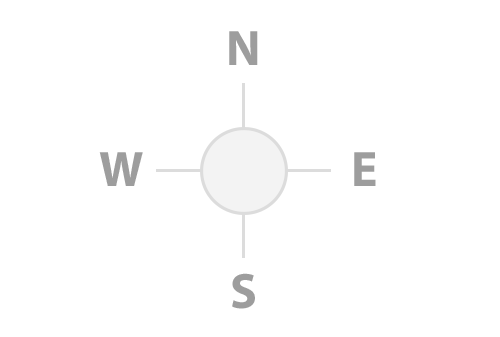
<style>
.page{position:relative;width:500px;height:337px;background:#ffffff}
.page>*{position:absolute;margin:0}
.t1{font:50px "MyriadPro-Bold";color:#9d9d9d}
</style>
<div class="page">
<p class="t1" style="left:229px;top:31px;width:29px;height:34px">N</p>
<p class="t1" style="left:99px;top:152px;width:44px;height:34px">W</p>
<p class="t1" style="left:354px;top:152px;width:22px;height:34px">E</p>
<p class="t1" style="left:232px;top:273px;width:23px;height:36px">S</p>
</div>
